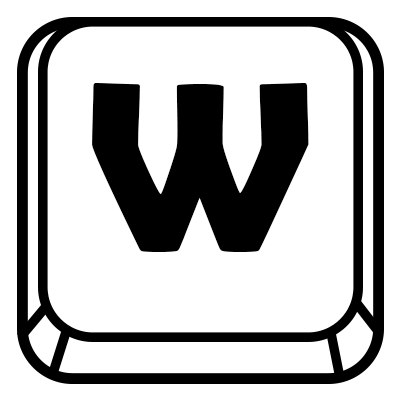
<style>
.page{position:relative;width:400px;height:400px;background:#ffffff}
.page>*{position:absolute;margin:0}
.t1{font:245.4px "BerlinSansFBDemi-Bold";color:#000000}
</style>
<div class="page">
<p class="t1" style="left:92px;top:83px;width:217px;height:169px">W</p>
</div>
